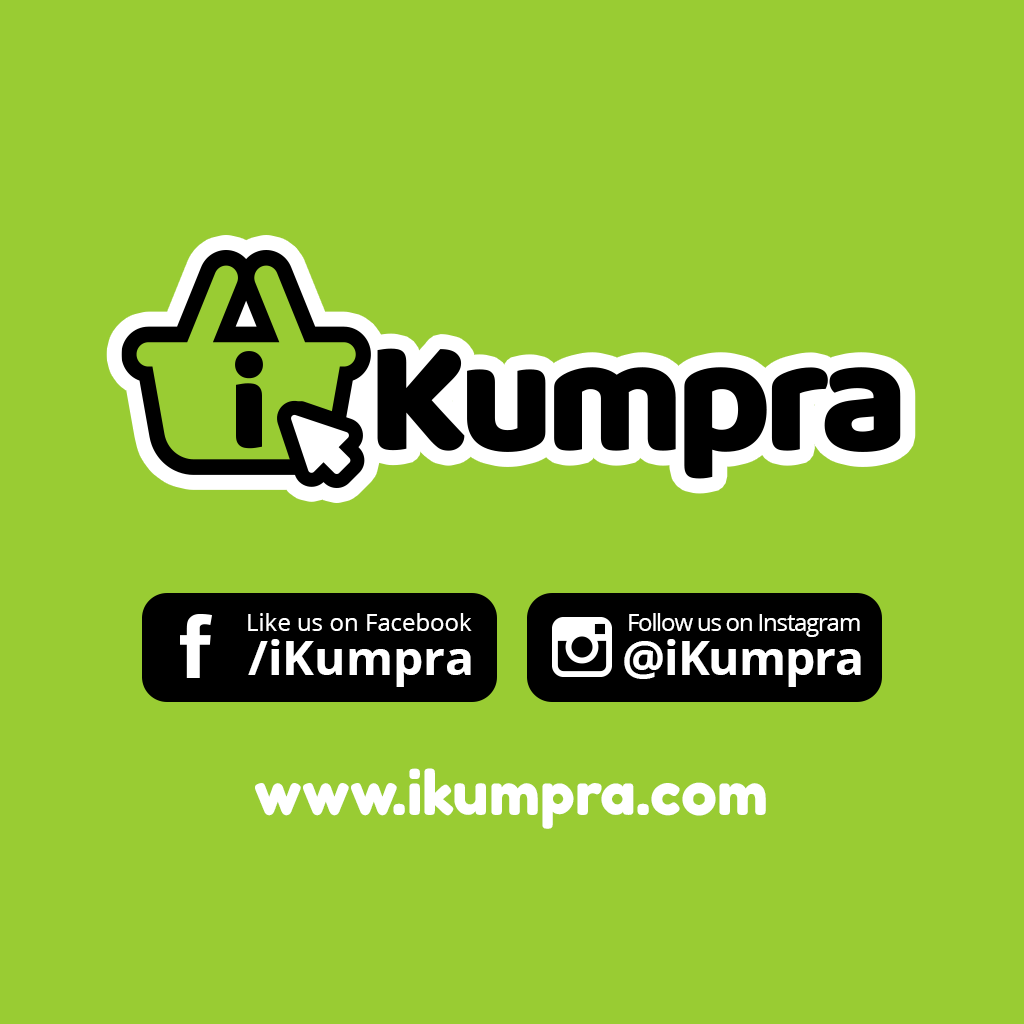
<style>
.page{position:relative;width:1024px;height:1024px;background:#99cc33}
.page>*{position:absolute;margin:0}
.t1{font:24px "OpenSans";color:#ffffff}
.t2{font:24px "OpenSans";letter-spacing:-0.05em;color:#ffffff}
.t3{font:48px "OpenSans-Bold";color:#ffffff}
.t4{font:48px "OpenSans-Bold";letter-spacing:-0.025em;color:#ffffff}
.t5{font:60px "FredokaOne-Regular";color:#ffffff}
</style>
<div class="page">
<p class="t1" style="left:248px;top:613px;width:224px;height:18px">Like us on Facebook</p>
<p class="t2" style="left:629px;top:613px;width:231px;height:24px">Follow us on Instagram</p>
<p class="t3" style="left:248px;top:639px;width:223px;height:48px">/iKumpra</p>
<p class="t4" style="left:624px;top:639px;width:237px;height:48px">@iKumpra</p>
<p class="t5" style="left:255px;top:768px;width:511px;height:61px">www.ikumpra.com</p>
</div>
